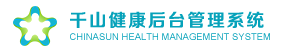
<style>
.page{position:relative;width:285px;height:53px;background:#ffffff}
.page>*{position:absolute;margin:0}
.t1{font:18px "FZZZHONGJW--GB1-0";letter-spacing:0.1em;color:#06a2ba}
.t2{font:9.5px "ArialMT";color:#06a2ba}
</style>
<div class="page">
<p class="t1" style="left:70px;top:11px;width:194px;height:18px">千山健康后台管理系统</p>
<p class="t2" style="left:70px;top:33px;width:200px;height:7px">CHINASUN HEALTH MANAGEMENT SYSTEM</p>
</div>
